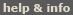
<style>
.page{position:relative;width:73px;height:15px;background:#5a5a5a}
.page>*{position:absolute;margin:0}
.t1{font:11px "Verdana-Bold";color:#dedbcb}
</style>
<div class="page">
<p class="t1" style="left:3px;top:3px;width:67px;height:11px">help &amp; info</p>
</div>
